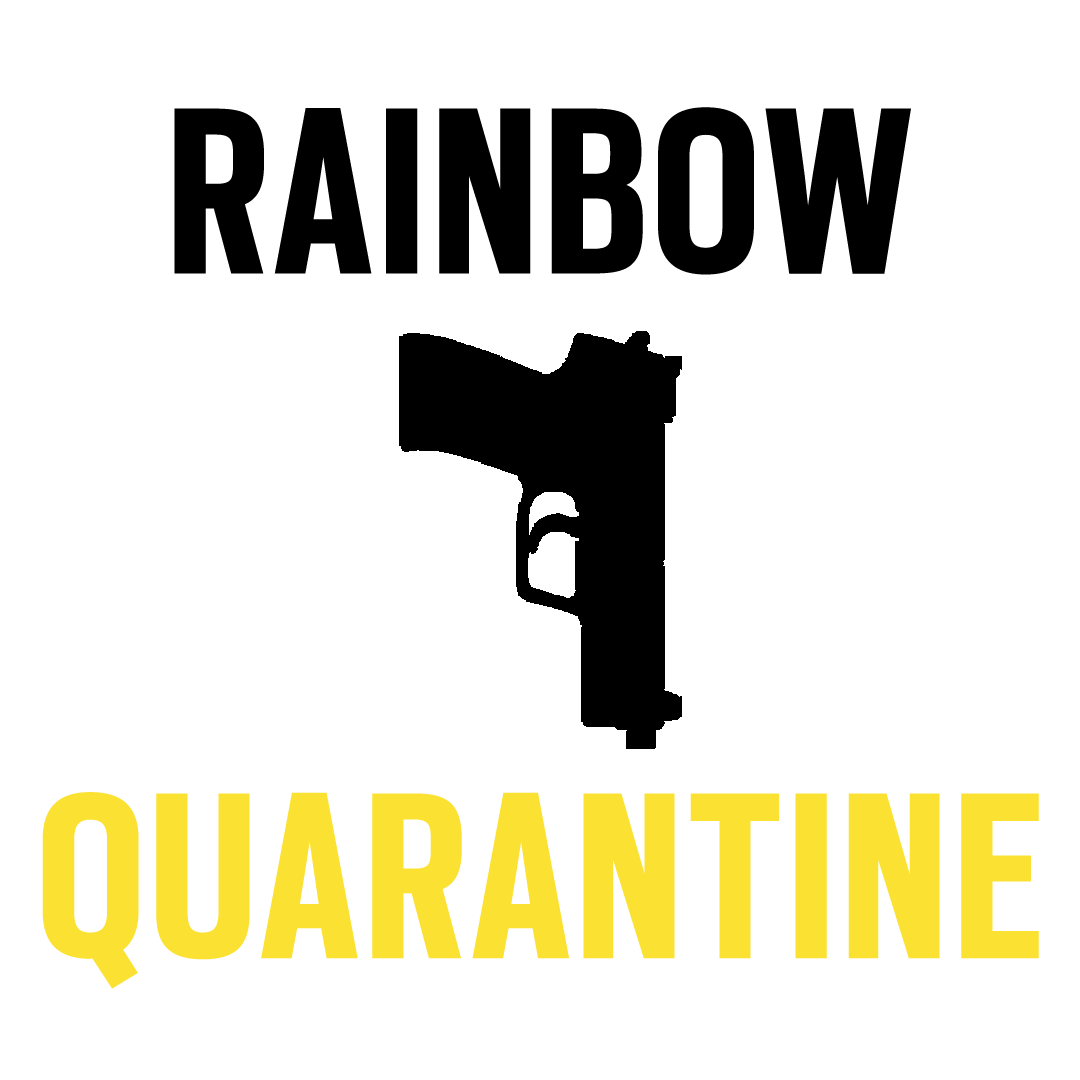
<style>
.page{position:relative;width:1080px;height:1080px;background:#ffffff}
.page>*{position:absolute;margin:0}
.t1{font:263px "ScoutCond-Bold";letter-spacing:0.025em;color:#000000}
.t2{font:263px "ScoutCond-Bold";letter-spacing:0.025em;color:#fbe132}
</style>
<div class="page">
<p class="t1" style="left:174px;top:107px;width:737px;height:168px">RAINBOW</p>
<p class="t2" style="left:42px;top:792px;width:997px;height:197px">QUARANTINE</p>
</div>
